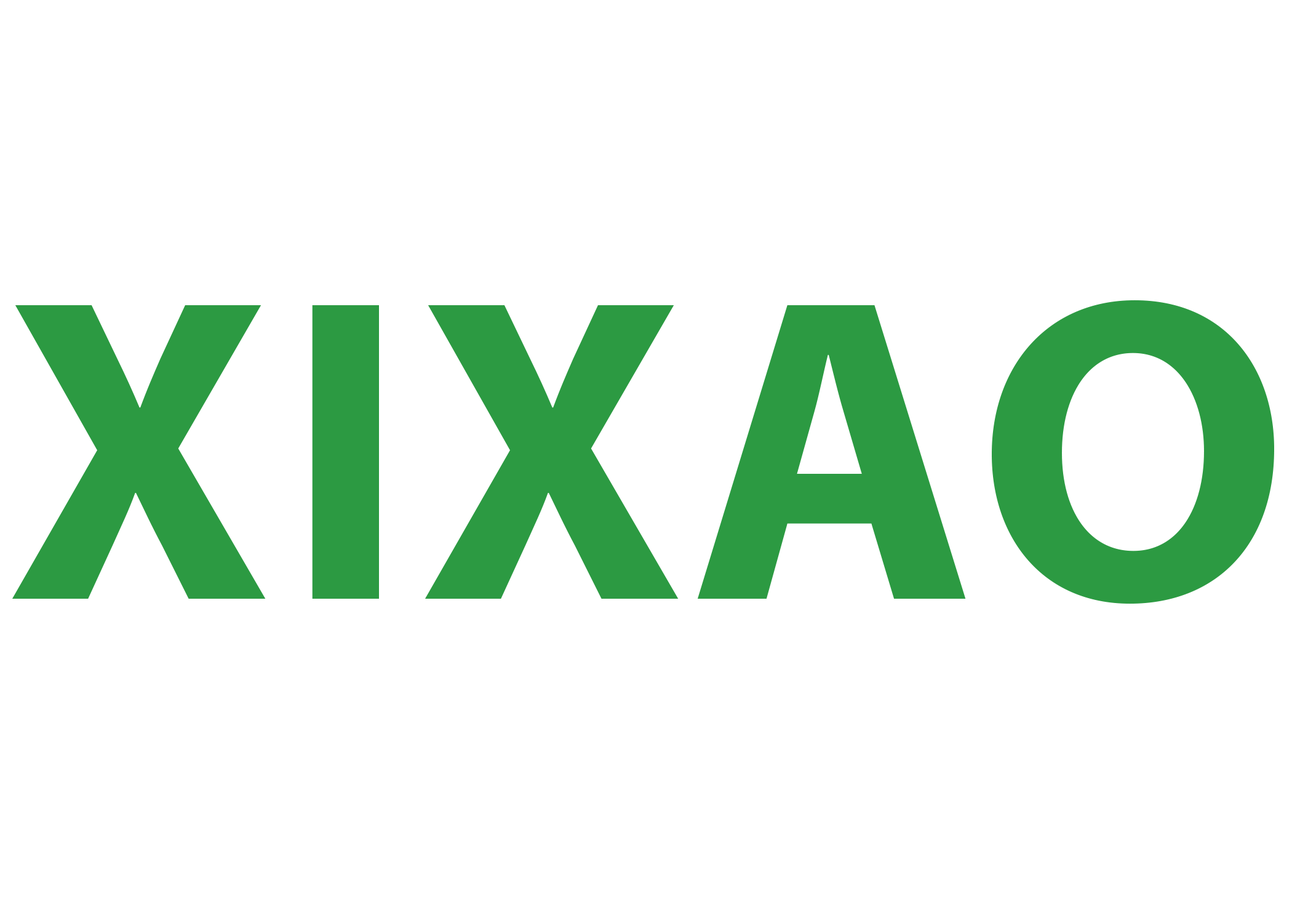
<style>
.page{position:relative;width:1292px;height:923px;background:#ffffff}
.page>*{position:absolute;margin:0}
.t1{font:435.5px "MyriadPro-Bold";letter-spacing:0.025em;color:#2c9a42;text-transform:uppercase}
</style>
<div class="page">
<p class="t1" style="left:12px;top:300px;width:1262px;height:304px">xixao</p>
</div>
